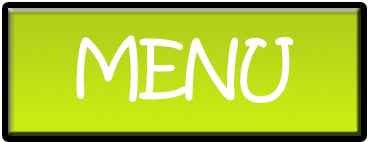
<style>
.page{position:relative;width:369px;height:142px}
.page>*{position:absolute;margin:0}
.t1{font:120px "KristenITC-Regular";letter-spacing:-0.1em;color:#ffffff}
.t2{font:20px "KristenITC-Regular";letter-spacing:-0.1em;color:#ffffff}
</style>
<div class="page">
<p class="t1" style="left:76px;top:35px;width:218px;height:68px"><span class="t2"><br><br><br><br><br><br><br><br><br></span>MENU</p>
</div>
